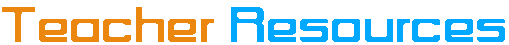
<style>
.page{position:relative;width:509px;height:45px;background:#ffffff}
.page>*{position:absolute;margin:0}
.t1{font:59.6px "UNIK2";color:#00a9ff;font-weight:bold;scale:1.17 1}
.t2{font:59.6px "UNIK2";color:#eb870f;font-weight:bold;scale:1.17 1}
</style>
<div class="page">
<p class="t1" style="left:2px;top:7px;width:503px;height:35px"><span class="t2">Teacher </span>Resources</p>
</div>
